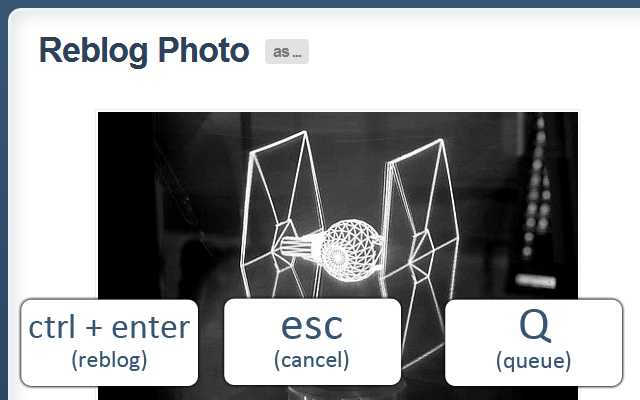
<style>
.page{position:relative;width:640px;height:400px;background:#ffffff}
.page>*{position:absolute;margin:0}
.t1{font:36px "Calibri";color:#375673}
.t2{font:24px "Calibri";color:#375673}
.t3{font:48px "Calibri";color:#375673}
</style>
<div class="page">
<p class="t1" style="left:29px;top:314px;width:161px;height:57px;text-align:center">ctrl + enter<br><span class="t2">(reblog)</span></p>
<p class="t2" style="left:275px;top:317px;width:74px;height:54px;text-align:center"><span class="t3">esc<br></span>(cancel)</p>
<p class="t2" style="left:497px;top:309px;width:74px;height:63px;text-align:center"><span class="t3">Q<br></span>(queue)</p>
</div>
